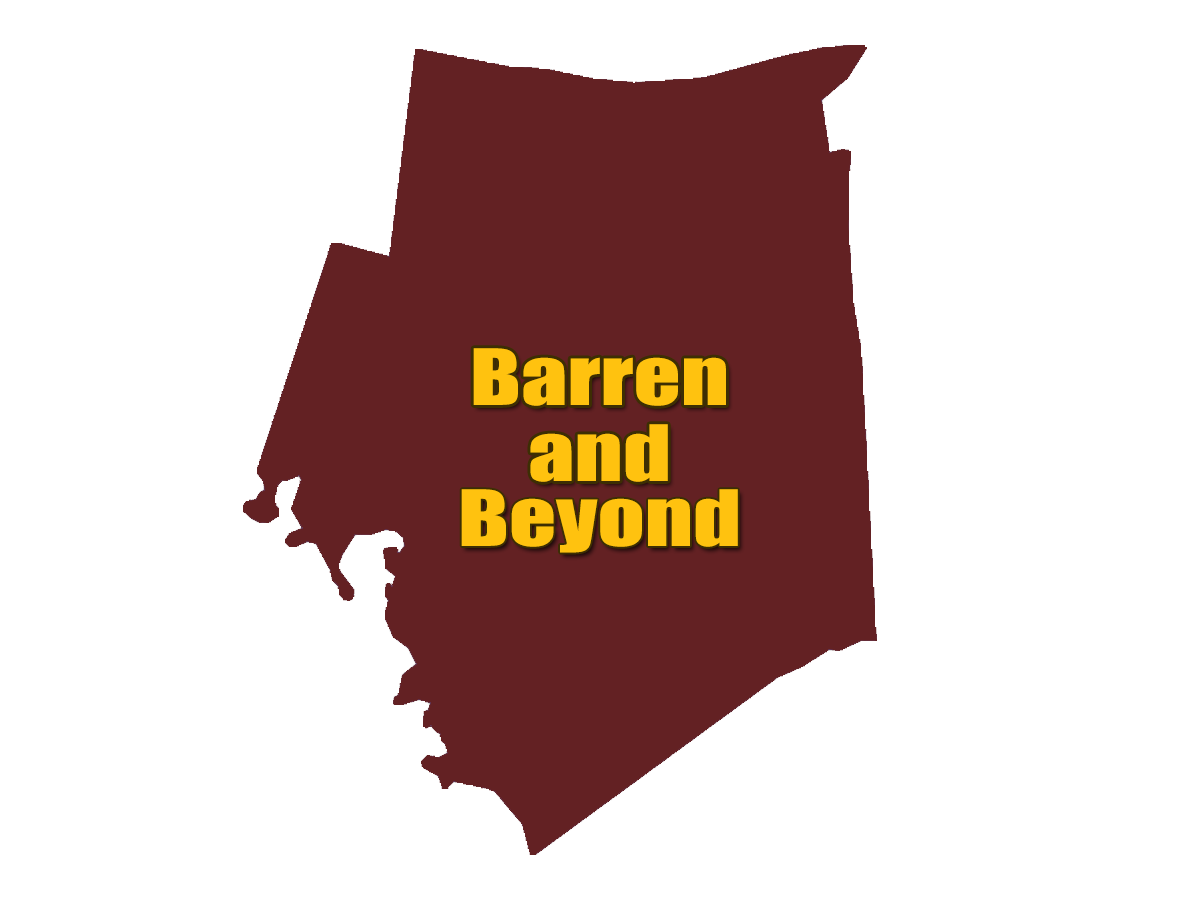
<style>
.page{position:relative;width:1200px;height:900px;background:#ffffff}
.page>*{position:absolute;margin:0}
.t1{font:71.9px "Impact";color:#ffc20f;scale:1.28 1}
.t2{font:71.9px "Impact";color:#ffc20f;scale:1.29 1}
</style>
<div class="page">
<p class="t1" style="left:473px;top:348px;width:253px;height:58px">Barren</p>
<p class="t2" style="left:530px;top:424px;width:138px;height:58px">and</p>
<p class="t1" style="left:461px;top:489px;width:277px;height:64px">Beyond</p>
</div>
